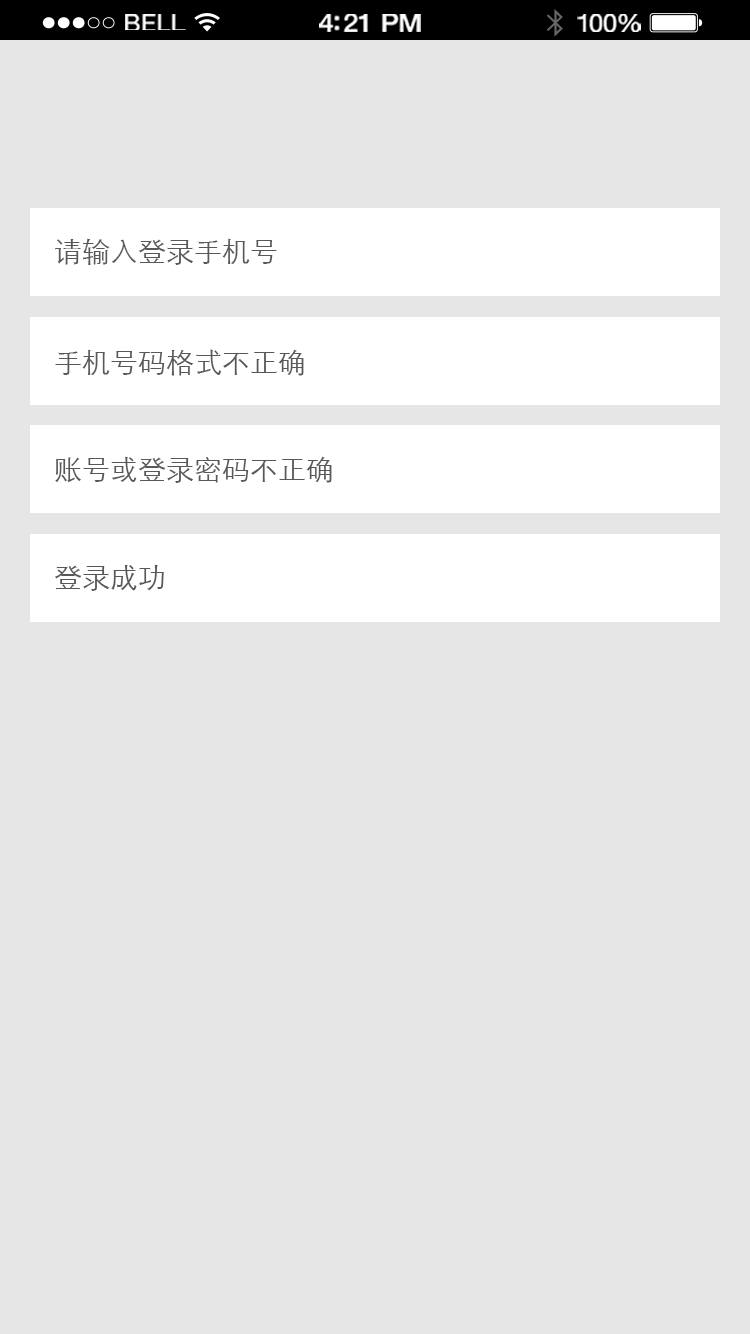
<style>
.page{position:relative;width:750px;height:1334px;background:#e6e6e6}
.page>*{position:absolute;margin:0}
.t1{font:23.3px "HelveticaNeue";letter-spacing:0.02em;color:#ffffff;scale:1.06 1}
.t2{font:25.3px "HelveticaNeue-Medium";letter-spacing:-0.02em;color:#ffffff;scale:1.06 1}
.t3{font:24.3px "HelveticaNeue";letter-spacing:-0.02em;color:#ffffff;scale:1.06 1}
.t4{font:28px "STXihei";color:#595757}
</style>
<div class="page">
<p class="t1" style="left:125px;top:14px;width:61px;height:16px">BELL</p>
<p class="t2" style="left:319px;top:14px;width:102px;height:18px">4:21 PM</p>
<p class="t3" style="left:577px;top:14px;width:64px;height:18px">100%</p>
<p class="t4" style="left:55px;top:238px;width:222px;height:27px">请输入登录手机号</p>
<p class="t4" style="left:55px;top:349px;width:249px;height:27px">手机号码格式不正确</p>
<p class="t4" style="left:55px;top:456px;width:277px;height:27px">账号或登录密码不正确</p>
<p class="t4" style="left:55px;top:564px;width:109px;height:27px">登录成功</p>
</div>
